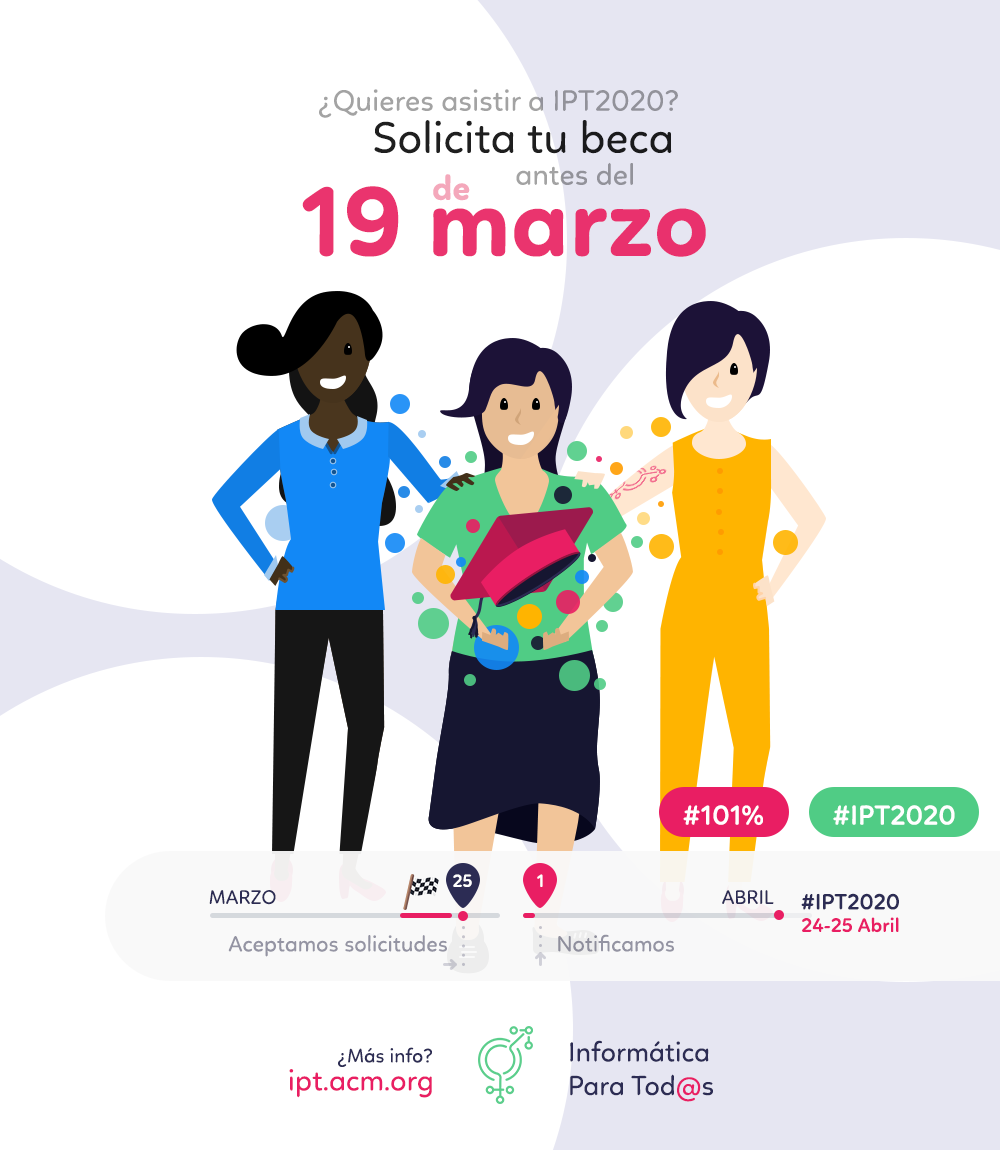
<style>
.page{position:relative;width:1000px;height:1150px;background:#ffffff}
.page>*{position:absolute;margin:0}
.t1{font:30px "Linotte-Regular";color:#a3a3a3}
.t2{font:45px "Linotte-Regular";color:#1f1f1f}
.t3{font:35px "Linotte-Bold";color:#f4a8bb}
.t4{font:30px "Linotte-Regular";color:#92929a}
.t5{font:101px "Linotte-Bold";color:#e91e63}
.t6{font:28px "Linotte-SemiBold";color:#ffffff}
.t7{font:18px "Linotte-SemiBold";color:#ffffff;text-transform:uppercase}
.t8{font:20px "Linotte-Regular";color:#2c2c54;text-transform:uppercase}
.t9{font:22.5px "Linotte-SemiBold";color:#2c2c54}
.t10{font:20px "Linotte-SemiBold";color:#e91e63}
.t11{font:22.5px "Linotte-Regular";color:#9494a3}
.t12{font:20px "Linotte-Regular";color:#2c2c54}
.t13{font:28px "Linotte-Regular";color:#2c2c54}
.t14{font:28px "Linotte-Regular";color:#e91e63}
.t15{font:30px "Linotte-Regular";color:#e91e63}
</style>
<div class="page">
<p class="t1" style="left:319px;top:89px;width:359px;height:29px">¿Quieres asistir a IPT2020?</p>
<p class="t2" style="left:374px;top:120px;width:298px;height:34px">Solicita tu beca</p>
<p class="t3" style="left:433px;top:174px;width:37px;height:27px">de</p>
<p class="t4" style="left:516px;top:162px;width:117px;height:23px">antes del</p>
<p class="t5" style="left:302px;top:186px;width:404px;height:71px;opacity:0.95">19 marzo</p>
<p class="t6" style="left:683px;top:805px;width:80px;height:20px">#101%</p>
<p class="t6" style="left:833px;top:805px;width:122px;height:20px">#IPT2020</p>
<p class="t7" style="left:453px;top:874px;width:19px;height:13px">25</p>
<p class="t7" style="left:537px;top:874px;width:6px;height:13px">1</p>
<p class="t8" style="left:209px;top:890px;width:67px;height:15px">MARzo</p>
<p class="t8" style="left:722px;top:890px;width:52px;height:14px">ABRIL</p>
<p class="t9" style="left:801px;top:893px;width:98px;height:17px">#IPT2020</p>
<p class="t10" style="left:802px;top:917px;width:97px;height:16px">24-25 Abril</p>
<p class="t11" style="left:228px;top:935px;width:219px;height:22px">Aceptamos solicitudes</p>
<p class="t11" style="left:558px;top:934px;width:116px;height:18px">Notificamos</p>
<p class="t12" style="left:338px;top:1047px;width:94px;height:20px">¿Más info?</p>
<p class="t13" style="left:570px;top:1040px;width:143px;height:62px;text-align:right">Informática<br>Para Tod<span class="t14">@</span>s</p>
<p class="t15" style="left:289px;top:1069px;width:143px;height:29px">ipt.acm.org</p>
</div>
